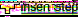
<style>
.page{position:relative;width:78px;height:17px}
.page>*{position:absolute;margin:0}
.t1{font:12px "ArialMT"}
</style>
<div class="page">
<p class="t1" style="left:21px;top:4px;width:57px;height:11px">Insert Step</p>
</div>
